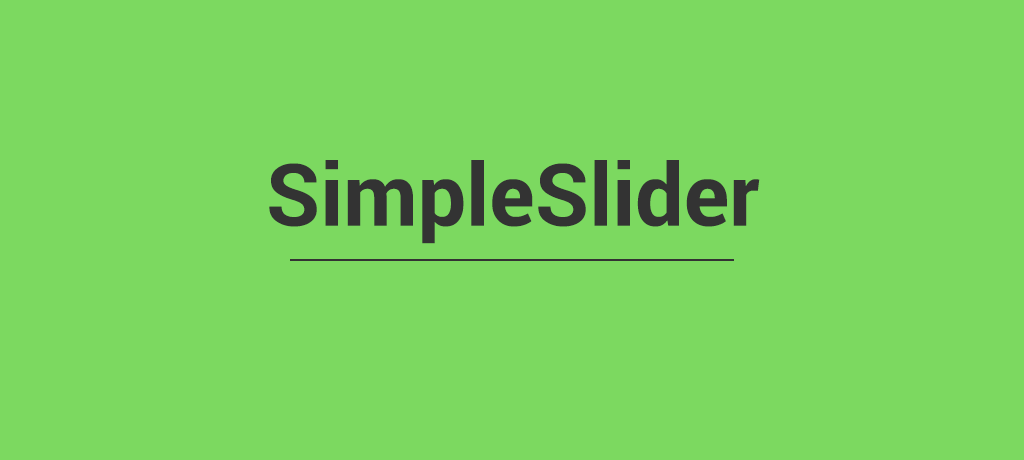
<style>
.page{position:relative;width:1024px;height:460px;background:#7cd960}
.page>*{position:absolute;margin:0}
.t1{font:86px "Roboto-Bold";color:#333333}
</style>
<div class="page">
<p class="t1" style="left:269px;top:160px;width:491px;height:84px">SimpleSlider</p>
<p class="t1" style="left:269px;top:160px;width:491px;height:84px">SimpleSlider</p>
<p class="t1" style="left:269px;top:160px;width:491px;height:84px">SimpleSlider</p>
</div>
